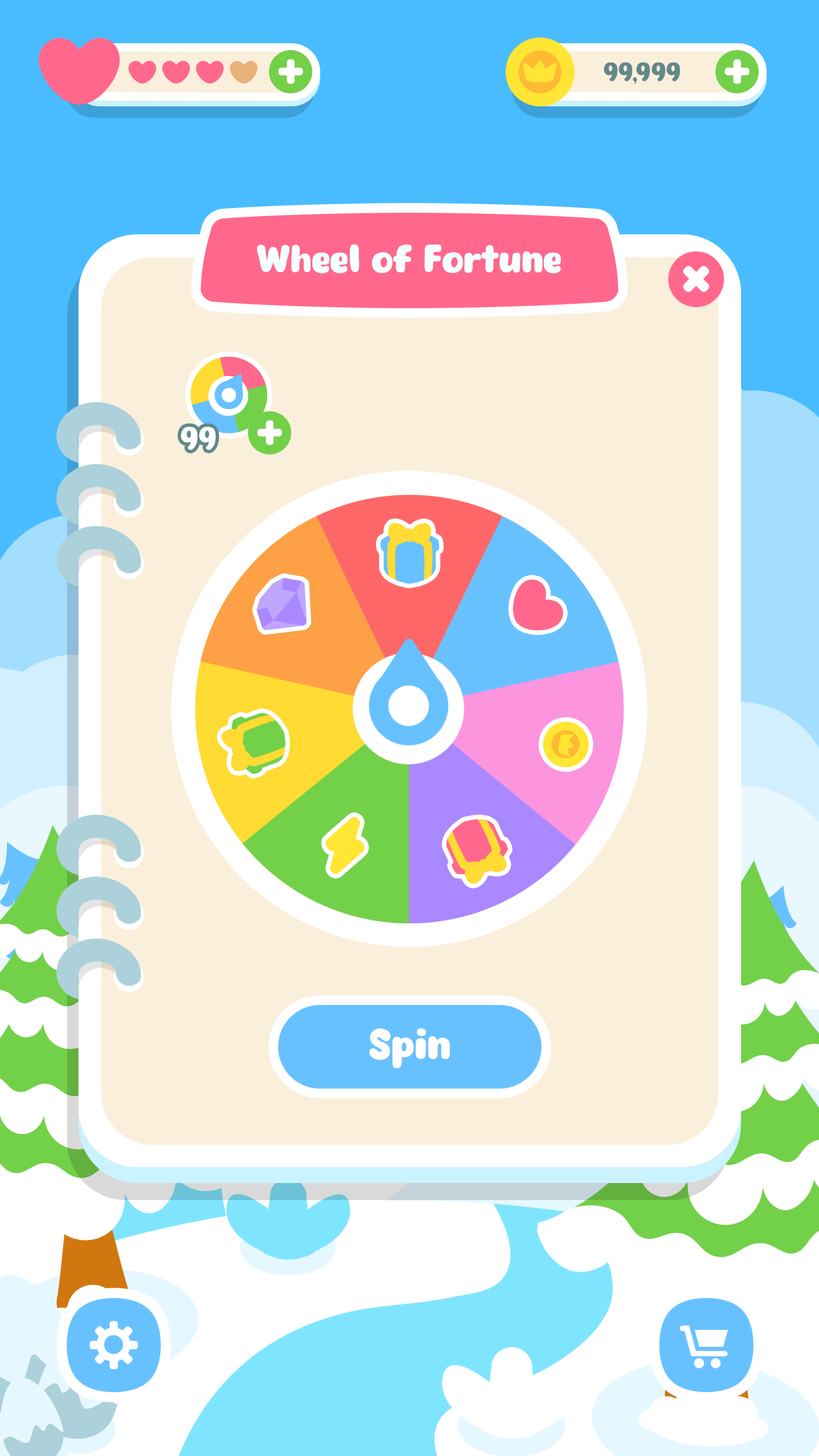
<style>
.page{position:relative;width:819px;height:1456px;background:#faefdb}
.page>*{position:absolute;margin:0}
.t1{font:37.5px "Eazy-Chat";color:#f5ffff}
.t2{font:31.3px "Eazy-Chat";color:#ffffff}
.t3{font:41px "Eazy-Chat";color:#fffeff}
</style>
<div class="page">
<p class="t1" style="left:257px;top:244px;width:304px;height:30px">Wheel of Fortune</p>
<p class="t2" style="left:181px;top:427px;width:35px;height:23px">99</p>
<p class="t3" style="left:369px;top:1028px;width:81px;height:41px">Spin</p>
</div>
